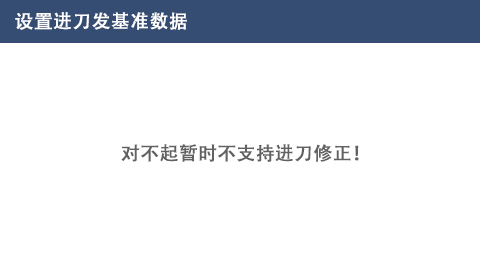
<style>
.page{position:relative;width:480px;height:272px;background:#ffffff}
.page>*{position:absolute;margin:0}
.t1{font:18.8px "AdobeHeitiStd-Regular";color:#ffffff;font-weight:bold}
.t2{font:18.8px "AdobeHeitiStd-Regular";color:#616161;font-weight:bold}
</style>
<div class="page">
<p class="t1" style="left:15px;top:12px;width:172px;height:18px">设置进刀发基准数据</p>
<p class="t2" style="left:121px;top:144px;width:238px;height:18px">对不起暂时不支持进刀修正！</p>
</div>
